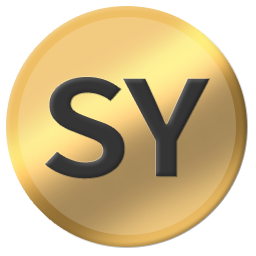
<style>
.page{position:relative;width:256px;height:256px;background:#ffffff}
.page>*{position:absolute;margin:0}
.t1{font:133.6px "NotoSansKR-Bold";letter-spacing:-0.05em;color:#353535;text-transform:uppercase;font-weight:bold;scale:1.12 1}
</style>
<div class="page">
<p class="t1" style="left:44px;top:76px;width:167px;height:104px">Sy</p>
</div>
